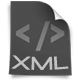
<style>
.page{position:relative;width:80px;height:80px;background:#ffffff}
.page>*{position:absolute;margin:0}
.t1{font:18.1px "PirulenRg-Regular";color:#c2c2c2}
</style>
<div class="page">
<p class="t1" style="left:11px;top:55px;width:58px;height:15px">XML</p>
</div>
